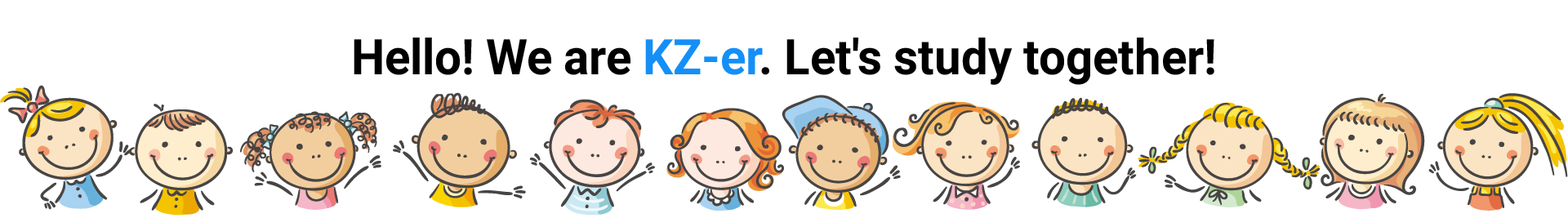
<style>
.page{position:relative;width:1568px;height:218px;background:#ffffff}
.page>*{position:absolute;margin:0}
.t1{font:49px "Roboto-Bold";color:#000000;scale:0.97 1}
.t2{font:49px "Roboto-Bold";color:#148ff8;scale:0.97 1}
</style>
<div class="page">
<p class="t1" style="left:354px;top:38px;width:860px;height:47px">Hello! We are <span class="t2">KZ-er</span>. Let's study together!</p>
</div>
